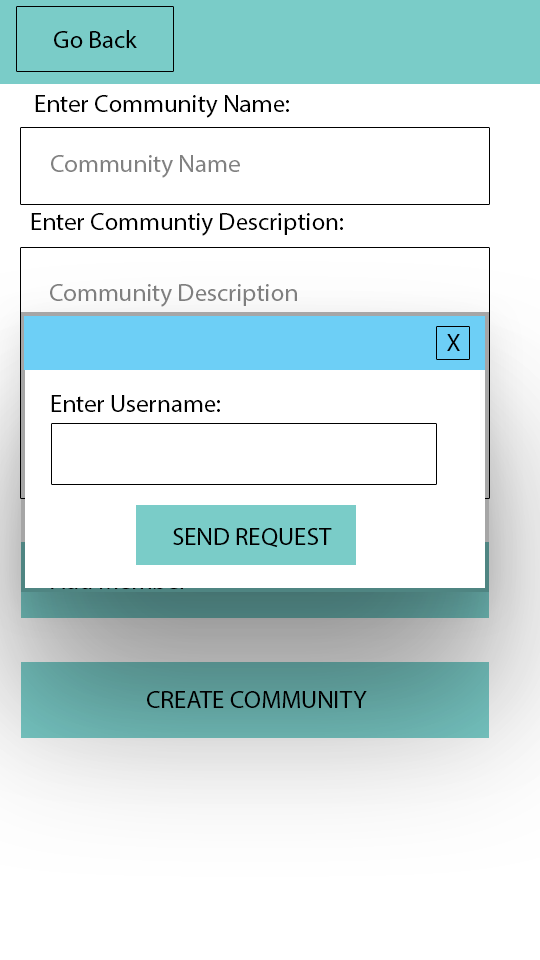
<style>
.page{position:relative;width:540px;height:960px;background:#ffffff}
.page>*{position:absolute;margin:0}
.t1{font:25px "MyriadPro-Regular";color:#000000}
.t2{font:25px "MyriadPro-Regular";color:#818181}
.t3{font:25px "MyriadPro-Regular";color:#7f7f7f}
</style>
<div class="page">
<p class="t1" style="left:54px;top:30px;width:83px;height:18px">Go Back</p>
<p class="t1" style="left:35px;top:95px;width:254px;height:23px">Enter Community Name:</p>
<p class="t2" style="left:51px;top:155px;width:189px;height:23px">Community Name</p>
<p class="t1" style="left:31px;top:213px;width:312px;height:23px">Enter Communtiy Description:</p>
<p class="t3" style="left:50px;top:284px;width:247px;height:23px">Community Description</p>
<p class="t1" style="left:447px;top:334px;width:13px;height:17px">X</p>
<p class="t1" style="left:51px;top:395px;width:169px;height:17px">Enter Username:</p>
<p class="t1" style="left:173px;top:528px;width:159px;height:20px">SEND REQUEST</p>
<p class="t1" style="left:147px;top:691px;width:220px;height:17px">CREATE COMMUNITY</p>
</div>
